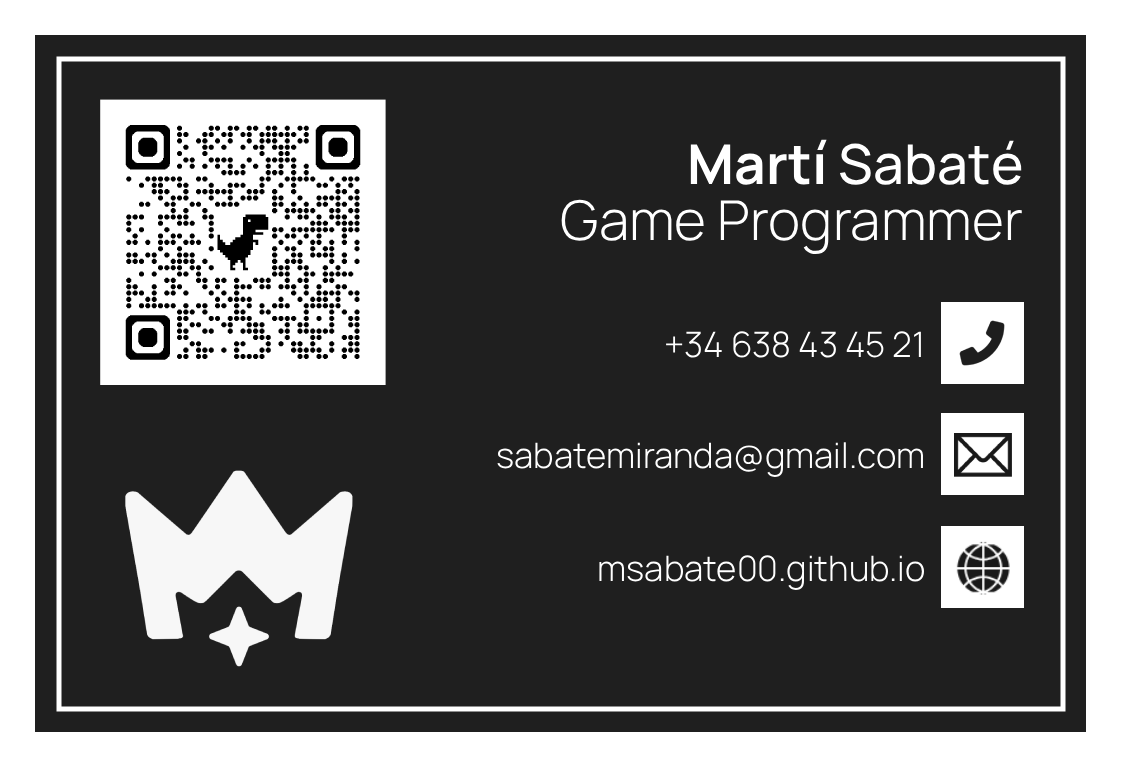
<style>
.page{position:relative;width:1122px;height:768px;background:#1f1f1f}
.page>*{position:absolute;margin:0}
.t1{font:55px "Manrope-Medium";color:#ffffff}
.t2{font:55px "Manrope-Bold";color:#ffffff}
.t3{font:55px "Manrope-Light";color:#ffffff}
.t4{font:35px "Manrope-Light";color:#ffffff}
</style>
<div class="page">
<p class="t1" style="left:690px;top:139px;width:332px;height:46px"><span class="t2">Martí </span>Sabaté</p>
<p class="t3" style="left:561px;top:199px;width:461px;height:56px">Game Programmer</p>
<p class="t4" style="left:666px;top:331px;width:255px;height:27px">+34 638 43 45 21</p>
<p class="t4" style="left:497px;top:442px;width:426px;height:35px">sabatemiranda@gmail.com</p>
<p class="t4" style="left:599px;top:555px;width:326px;height:35px">msabate00.github.io</p>
</div>
